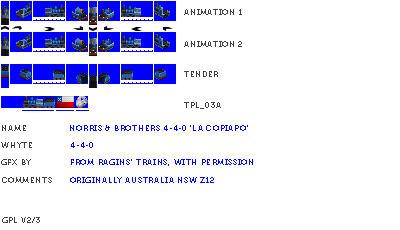
<style>
.page{position:relative;width:400px;height:230px;background:#ffffff}
.page>*{position:absolute;margin:0}
.t1{font:8px "Museo700-Regular";letter-spacing:0.075em;color:#404040;text-transform:uppercase}
.t2{font:8px "Museo700-Regular";letter-spacing:0.075em;color:#0000ff;text-transform:uppercase}
</style>
<div class="page">
<p class="t1" style="left:184px;top:9px;width:58px;height:6px">Animation 1</p>
<p class="t1" style="left:184px;top:41px;width:58px;height:6px">Animation 2</p>
<p class="t1" style="left:184px;top:71px;width:34px;height:6px">tender</p>
<p class="t1" style="left:184px;top:102px;width:37px;height:7px">tpl_03a</p>
<p class="t1" style="left:2px;top:125px;width:24px;height:6px">name</p>
<p class="t2" style="left:70px;top:125px;width:178px;height:6px">Norris &amp; Brothers 4-4-0 'La Copiapo'</p>
<p class="t1" style="left:1px;top:142px;width:31px;height:6px">whyte</p>
<p class="t2" style="left:71px;top:142px;width:22px;height:6px">4-4-0</p>
<p class="t1" style="left:1px;top:159px;width:30px;height:6px">gfx by</p>
<p class="t2" style="left:71px;top:159px;width:182px;height:7px">from ragins' trains, with permission</p>
<p class="t1" style="left:2px;top:177px;width:50px;height:6px">comments</p>
<p class="t2" style="left:70px;top:177px;width:144px;height:6px">originally australia nsw z12</p>
<p class="t1" style="left:2px;top:217px;width:38px;height:6px">gpl v2/3</p>
</div>
